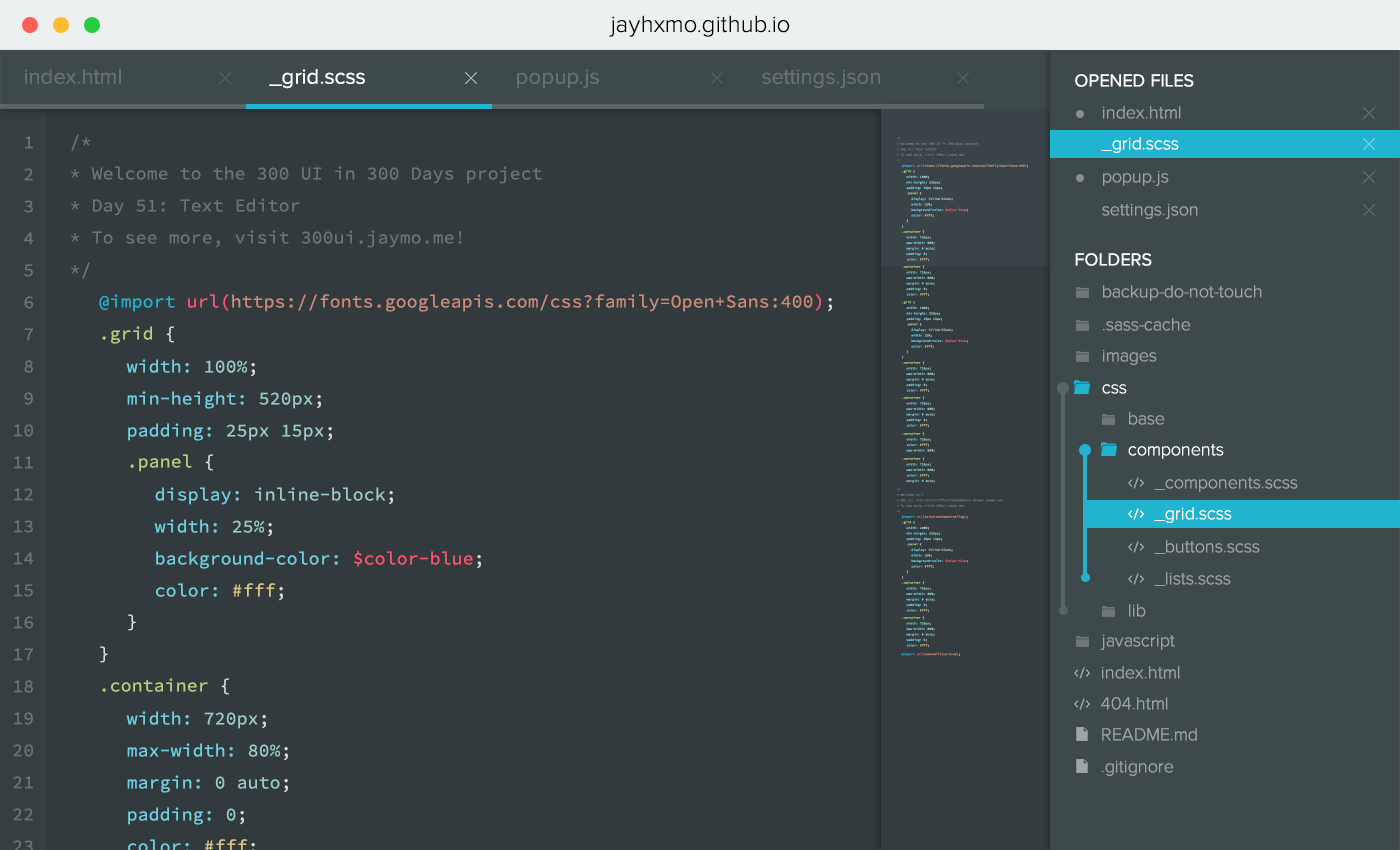
<style>
.page{position:relative;width:1400px;height:850px;background:#333a3d}
.page>*{position:absolute;margin:0}
.t1{font:24px "ProximaNova-Light";color:#000000}
.t2{font:22px "ProximaNova-Regular";color:#686f70}
.t3{font:22px "ProximaNova-Regular";color:#ffffff}
.t4{font:18px "ProximaNova-Regular";color:#ffffff}
.t5{font:18px "ProximaNova-Light";color:#9fa4a5}
.t6{font:18px/32px "SourceCodePro-Regular";color:#6a7577}
.t7{font:18px "ProximaNova-Light";color:#ffffff}
.t8{font:18px/32px "SourceCodePro-Regular";color:#cb8c7b}
.t9{font:18px/32px "SourceCodePro-Regular";color:#20b4d0}
.t10{font:18px/32px "SourceCodePro-Regular";color:#ff5370}
.t11{font:18px/32px "SourceCodePro-Regular";color:#dddddd}
.t12{font:18px/32px "SourceCodePro-Regular";color:#b1d37f}
.t13{font:18px/32px "SourceCodePro-Regular";color:#6fd1e3}
.t14{font:18px/32px "SourceCodePro-Regular";color:#99ccc7}
.t15{font:18px/31px "SourceCodePro-Regular";color:#b1d37f}
.t16{font:18px/31px "SourceCodePro-Regular";color:#dddddd}
.t17{font:18px/32px "SourceCodePro-Regular";color:#d7c782}
.t18{font:18px "SourceCodePro-Regular";color:#b1d37f}
.t19{font:18px "SourceCodePro-Regular";color:#dddddd}
</style>
<div class="page">
<p class="t1" style="left:609px;top:15px;width:181px;height:22px">jayhxmo.github.io</p>
<p class="t2" style="left:24px;top:69px;width:97px;height:15px">index.html</p>
<p class="t3" style="left:269px;top:69px;width:96px;height:20px">_grid.scss</p>
<p class="t2" style="left:517px;top:69px;width:82px;height:20px">popup.js</p>
<p class="t2" style="left:762px;top:69px;width:118px;height:20px">settings.json</p>
<p class="t4" style="left:1075px;top:74px;width:119px;height:13px">OPENED FILES</p>
<p class="t5" style="left:1102px;top:106px;width:79px;height:13px">index.html</p>
<p class="t6" style="left:71px;top:134px;width:471px;height:145px">/* <br>* Welcome to the 300 UI in 300 Days project<br>* Day 51: Text Editor<br>* To see more, visit 300ui.jaymo.me!<br>*/</p>
<p class="t7" style="left:1101px;top:137px;width:78px;height:16px">_grid.scss</p>
<p class="t5" style="left:1103px;top:170px;width:66px;height:16px">popup.js</p>
<p class="t5" style="left:1102px;top:203px;width:96px;height:16px">settings.json</p>
<p class="t4" style="left:1075px;top:253px;width:77px;height:13px">FOLDERS</p>
<p class="t8" style="left:99px;top:294px;width:733px;height:369px"><span class="t9">@import </span><span class="t10">url(</span>https://fonts.googleapis.com/css?family=Open+Sans:400<span class="t10">)</span><span class="t11">;<br></span><span class="t12">.grid </span><span class="t11">{<br><br><br><br><br><br><br><br><br><br>}</span></p>
<p class="t5" style="left:1103px;top:285px;width:159px;height:16px">backup-do-not-touch</p>
<p class="t5" style="left:1102px;top:318px;width:89px;height:13px">.sass-cache</p>
<p class="t5" style="left:1102px;top:349px;width:55px;height:16px">images</p>
<p class="t13" style="left:126px;top:359px;width:206px;height:272px">width: <span class="t14">100%</span><span class="t11">;<br></span>min-height: <span class="t14">520px</span><span class="t11">;<br></span>padding: <span class="t14">25px 15px</span><span class="t11">;<br></span><span class="t15">.panel</span><span class="t16"> {<br></span><span class="t11"><br><br><br><br>}</span></p>
<p class="t7" style="left:1102px;top:384px;width:25px;height:10px">css</p>
<p class="t5" style="left:1129px;top:412px;width:36px;height:13px">base</p>
<p class="t7" style="left:1128px;top:444px;width:96px;height:15px">components</p>
<p class="t5" style="left:1154px;top:477px;width:144px;height:15px">_components.scss</p>
<p class="t13" style="left:154px;top:487px;width:327px;height:114px">display: <span class="t14">inline-block</span><span class="t11">;<br></span>width: <span class="t14">25%</span><span class="t11">;<br></span>background-color: <span class="t10">$color-blue</span><span class="t11">;<br></span>color: <span class="t17">#fff</span><span class="t11">;</span></p>
<p class="t7" style="left:1154px;top:507px;width:78px;height:16px">_grid.scss</p>
<p class="t5" style="left:1154px;top:540px;width:106px;height:14px">_buttons.scss</p>
<p class="t5" style="left:1154px;top:572px;width:77px;height:14px">_lists.scss</p>
<p class="t5" style="left:1129px;top:604px;width:17px;height:13px">lib</p>
<p class="t5" style="left:1100px;top:634px;width:75px;height:16px">javascript</p>
<p class="t18" style="left:102px;top:678px;width:127px;height:17px">.container <span class="t19">{</span></p>
<p class="t5" style="left:1101px;top:666px;width:79px;height:13px">index.html</p>
<p class="t5" style="left:1101px;top:697px;width:67px;height:13px">404.html</p>
<p class="t5" style="left:1102px;top:728px;width:95px;height:13px">README.md</p>
<p class="t5" style="left:1101px;top:760px;width:73px;height:16px">.gitignore</p>
</div>
